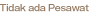
<style>
.page{position:relative;width:89px;height:15px;background:#ffffff}
.page>*{position:absolute;margin:0}
.t1{font:8.8px "GothicMB101Pro-DeBold";letter-spacing:-0.04em;color:#8b6e51}
</style>
<div class="page">
<p class="t1" style="left:0px;top:4px;width:89px;height:8px;opacity:0.9">Tidak ada Pesawat</p>
</div>
